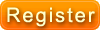
<style>
.page{position:relative;width:100px;height:30px}
.page>*{position:absolute;margin:0}
.t1{font:20px "ArialMT";letter-spacing:0.1em;color:#ffffcc}
</style>
<div class="page">
<p class="t1" style="left:6px;top:5px;width:90px;height:23px">Register</p>
</div>
